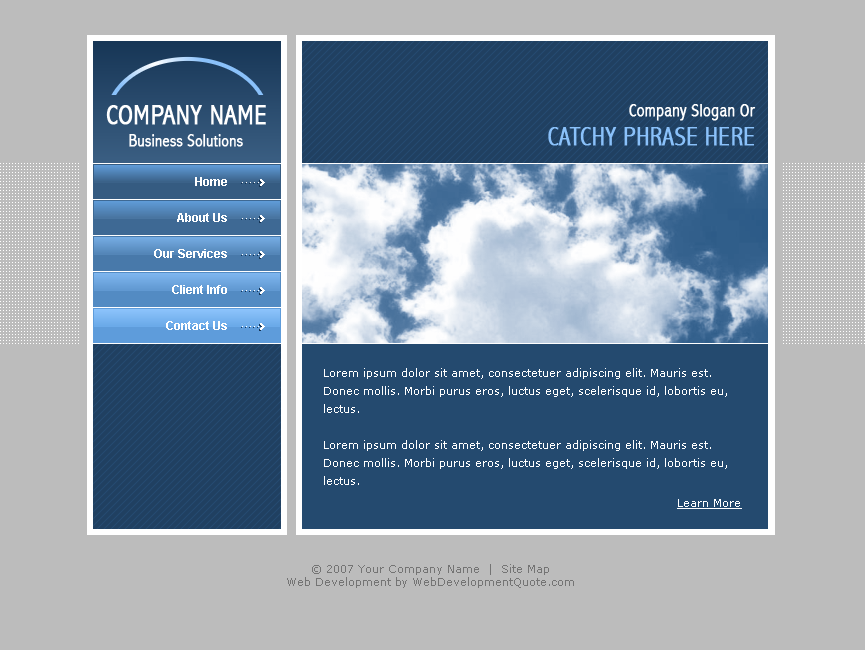
<style>
.page{position:relative;width:865px;height:650px;background:#bcbcbc}
.page>*{position:absolute;margin:0}
.t1{font:28px "AbadiMT-CondensedLight";color:#ffffff;font-weight:bold}
.t2{font:18px "AbadiMT-CondensedLight";color:#ffffff;font-weight:bold}
.t3{font:17px "AbadiMT-CondensedLight";color:#ffffff;font-weight:bold}
.t4{font:26px "AbadiMT-CondensedLight";color:#8ac1fa;font-weight:bold}
.t5{font:12px "Arial-BoldMT";color:#ffffff}
.t6{font:11px/18px "Verdana";color:#ffffff}
.t7{font:11px "Verdana";color:#ffffff;text-decoration:underline}
.t8{font:11px "Verdana";color:#747474}
</style>
<div class="page">
<p class="t1" style="left:106px;top:105px;width:160px;height:20px">COMPANY NAME</p>
<p class="t2" style="left:629px;top:104px;width:127px;height:17px">Company Slogan Or</p>
<p class="t3" style="left:129px;top:134px;width:114px;height:13px">Business Solutions</p>
<p class="t4" style="left:548px;top:127px;width:206px;height:19px">CATCHY PHRASE HERE</p>
<p class="t5" style="left:195px;top:177px;width:32px;height:9px">Home</p>
<p class="t5" style="left:177px;top:213px;width:50px;height:9px">About Us</p>
<p class="t5" style="left:154px;top:249px;width:73px;height:9px">Our Services</p>
<p class="t5" style="left:172px;top:285px;width:55px;height:9px">Client Info</p>
<p class="t5" style="left:166px;top:321px;width:61px;height:9px">Contact Us</p>
<p class="t6" style="left:324px;top:368px;width:403px;height:117px">Lorem ipsum dolor sit amet, consectetuer adipiscing elit. Mauris est. <br>Donec mollis. Morbi purus eros, luctus eget, scelerisque id, lobortis eu, <br>lectus.<br><br>Lorem ipsum dolor sit amet, consectetuer adipiscing elit. Mauris est. <br>Donec mollis. Morbi purus eros, luctus eget, scelerisque id, lobortis eu, <br>lectus.</p>
<p class="t7" style="left:677px;top:499px;width:65px;height:10px">Learn More</p>
<p class="t8" style="left:287px;top:564px;width:287px;height:24px;text-align:center">© 2007 Your Company Name  |  Site Map<br>Web Development by WebDevelopmentQuote.com</p>
</div>
